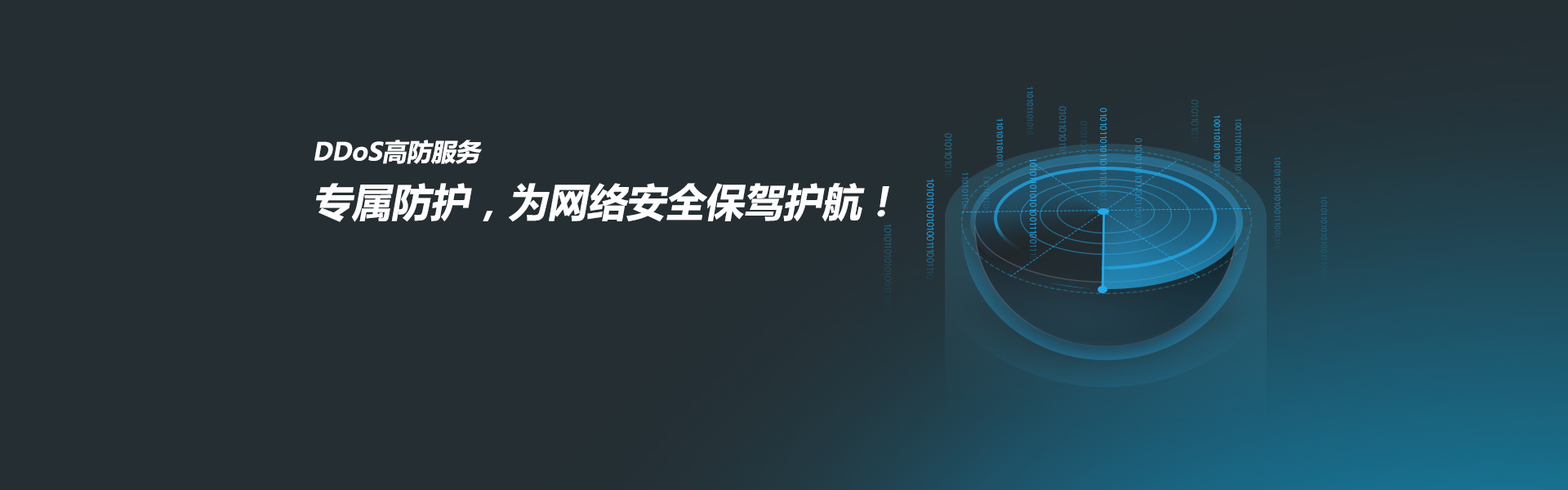
<style>
.page{position:relative;width:1568px;height:490px;background:#252e33}
.page>*{position:absolute;margin:0}
.t1{font:39.2px "MicrosoftYaHei-Bold";color:#fefefe;font-style:italic}
.t2{font:24.5px "MicrosoftYaHei-Bold";color:#fefefe;font-style:italic}
</style>
<div class="page">
<p class="t1" style="left:314px;top:140px;width:575px;height:82px"><span class="t2">DDoS高防服务<br></span>专属防护，为网络安全保驾护航！</p>
</div>
